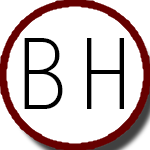
<style>
.page{position:relative;width:150px;height:150px;background:#ffffff}
.page>*{position:absolute;margin:0}
.t1{font:98px "LetterGothicStd";letter-spacing:0.05em;color:#000000}
</style>
<div class="page">
<p class="t1" style="left:24px;top:38px;width:100px;height:71px">BH</p>
</div>
